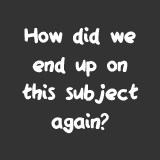
<style>
.page{position:relative;width:160px;height:160px;background:#333333}
.page>*{position:absolute;margin:0}
.t1{font:23.9px "QAReports";color:#ffffff}
</style>
<div class="page">
<p class="t1" style="left:22px;top:27px;width:117px;height:107px;text-align:center">How did we<br>end up on<br>this subject<br>again?</p>
</div>
